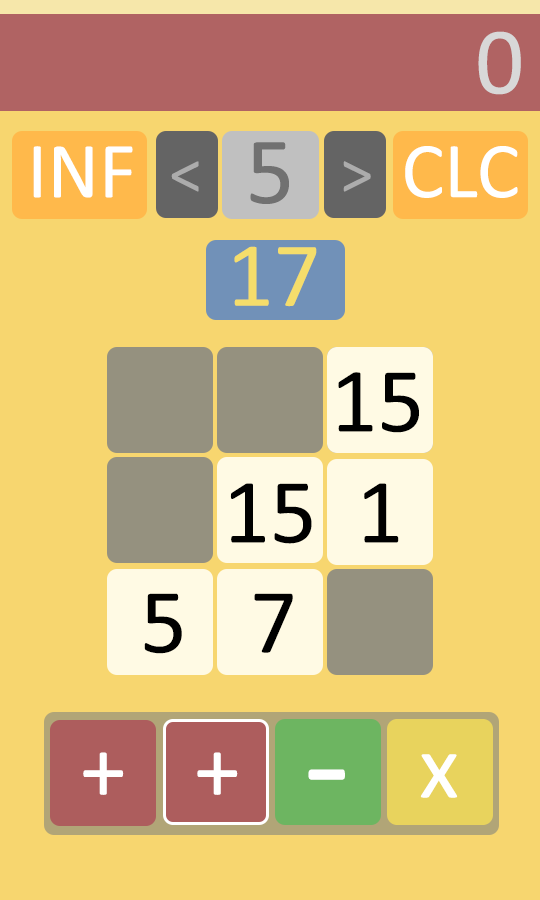
<style>
.page{position:relative;width:540px;height:900px;background:#f7d66f}
.page>*{position:absolute;margin:0}
.t1{font:96px "Calibri";color:#d8d8d8}
.t2{font:80px "Calibri";color:#ffffff}
.t3{font:96px "Calibri";color:#717171}
.t4{font:64px "Calibri";color:#c0c0c0}
.t5{font:92.5px "Calibri";color:#f5dd6b}
.t6{font:92.5px "Calibri";color:#000000}
.t7{font:92.2px "Calibri";color:#ffffff}
.t8{font:152.1px "Calibri";color:#ffffff}
</style>
<div class="page">
<p class="t1" style="left:478px;top:31px;width:43px;height:64px">0</p>
<p class="t2" style="left:33px;top:146px;width:100px;height:52px">INF</p>
<p class="t3" style="left:250px;top:142px;width:39px;height:62px">5</p>
<p class="t2" style="left:405px;top:146px;width:113px;height:52px">CLC</p>
<p class="t4" style="left:171px;top:161px;width:28px;height:31px;opacity:0.75">&lt;</p>
<p class="t4" style="left:343px;top:161px;width:28px;height:31px;opacity:0.75">&gt;</p>
<p class="t5" style="left:234px;top:246px;width:83px;height:61px">17</p>
<p class="t6" style="left:338px;top:372px;width:81px;height:61px">15</p>
<p class="t6" style="left:230px;top:483px;width:82px;height:61px">15</p>
<p class="t6" style="left:364px;top:483px;width:35px;height:60px">1</p>
<p class="t6" style="left:144px;top:593px;width:38px;height:61px">5</p>
<p class="t6" style="left:254px;top:593px;width:39px;height:60px">7</p>
<p class="t7" style="left:83px;top:752px;width:41px;height:43px">+</p>
<p class="t7" style="left:197px;top:752px;width:41px;height:43px">+</p>
<p class="t7" style="left:420px;top:754px;width:38px;height:44px">x</p>
<p class="t8" style="left:308px;top:769px;width:37px;height:11px">-</p>
</div>
